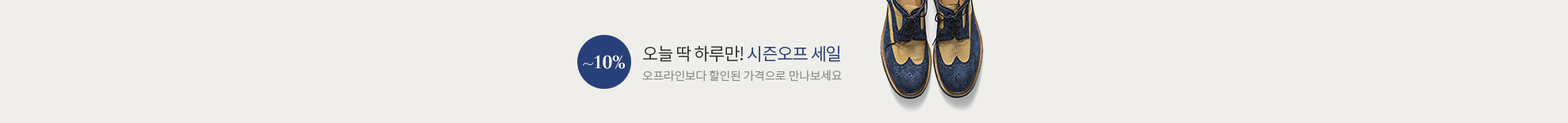
<style>
.page{position:relative;width:1568px;height:123px;background:#efeeea}
.page>*{position:absolute;margin:0}
.t1{font:17.4px "NotoSansCJKkr-DemiLight";letter-spacing:-0.05em;color:#333333}
.t2{font:17.4px "NotoSansCJKkr-DemiLight";letter-spacing:-0.05em;color:#284079}
.t3{font:17.4px "DidotLH-Bold";letter-spacing:-0.01em;color:#ffffff}
.t4{font:11.9px "NotoSansCJKkr-DemiLight";letter-spacing:-0.02em;color:#8d8d8d}
</style>
<div class="page">
<p class="t1" style="left:643px;top:45px;width:197px;height:17px">오늘 딱 하루만! <span class="t2">시즌오프 세일</span></p>
<p class="t3" style="left:583px;top:55px;width:42px;height:14px">~10%</p>
<p class="t4" style="left:642px;top:70px;width:200px;height:12px">오프라인보다 할인된 가격으로 만나보세요</p>
</div>
